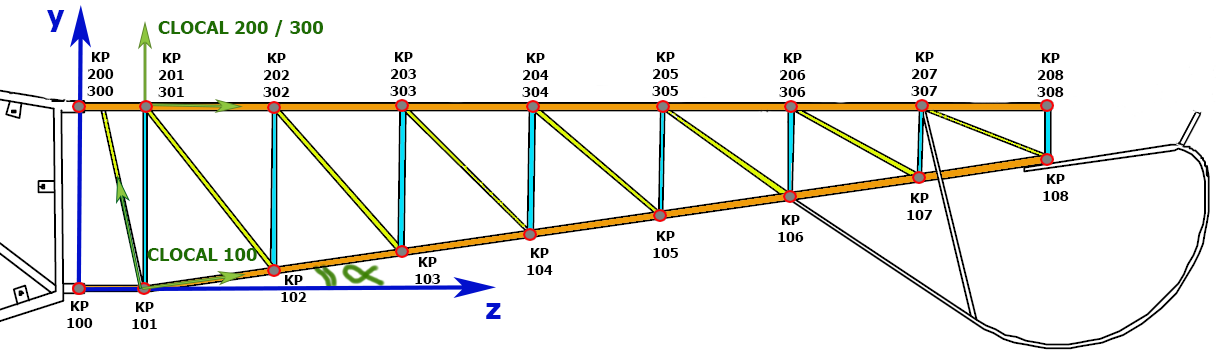
<style>
.page{position:relative;width:1216px;height:361px;background:#ffffff}
.page>*{position:absolute;margin:0}
.t1{font:30px "Tahoma-Bold";color:#0210cc}
.t2{font:18px "Tahoma-Bold";color:#1e6c03}
.t3{font:14px "Tahoma-Bold";color:#000000}
</style>
<div class="page">
<p class="t1" style="left:47px;top:10px;width:18px;height:22px">y</p>
<p class="t2" style="left:158px;top:20px;width:165px;height:17px">CLOCAL 200 / 300</p>
<p class="t3" style="left:87px;top:52px;width:27px;height:44px">KP<br>200<br>300</p>
<p class="t3" style="left:158px;top:53px;width:26px;height:44px">KP<br>201<br>301</p>
<p class="t3" style="left:263px;top:53px;width:27px;height:44px">KP<br>202<br>302</p>
<p class="t3" style="left:390px;top:52px;width:26px;height:44px">KP<br>203<br>303</p>
<p class="t3" style="left:522px;top:53px;width:27px;height:44px">KP<br>204<br>304</p>
<p class="t3" style="left:652px;top:52px;width:26px;height:44px">KP<br>205<br>305</p>
<p class="t3" style="left:779px;top:53px;width:27px;height:44px">KP<br>206<br>306</p>
<p class="t3" style="left:911px;top:52px;width:26px;height:44px">KP<br>207<br>307</p>
<p class="t3" style="left:1037px;top:53px;width:27px;height:44px">KP<br>208<br>308</p>
<p class="t3" style="left:1043px;top:174px;width:26px;height:27px">KP<br>108</p>
<p class="t3" style="left:907px;top:193px;width:25px;height:27px">KP<br>107</p>
<p class="t3" style="left:778px;top:215px;width:26px;height:27px">KP<br>106</p>
<p class="t3" style="left:653px;top:231px;width:25px;height:27px">KP<br>105</p>
<p class="t2" style="left:147px;top:248px;width:110px;height:13px">CLOCAL 100</p>
<p class="t3" style="left:415px;top:257px;width:25px;height:27px">KP<br>103</p>
<p class="t3" style="left:527px;top:248px;width:26px;height:27px">KP<br>104</p>
<p class="t3" style="left:281px;top:275px;width:26px;height:27px">KP<br>102</p>
<p class="t3" style="left:67px;top:301px;width:26px;height:27px">KP<br>100</p>
<p class="t3" style="left:132px;top:302px;width:25px;height:27px">KP<br>101</p>
<p class="t1" style="left:486px;top:303px;width:15px;height:16px">z</p>
</div>
